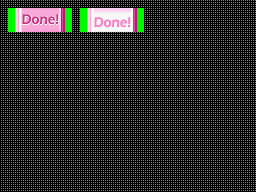
<style>
.page{position:relative;width:256px;height:192px;background:#000000}
.page>*{position:absolute;margin:0}
.t1{font:14.3px "ErasITC-Demi";color:#c83888;scale:0.91 1}
.t2{font:14.3px "ErasITC-Demi";color:#f880c8;scale:0.91 1}
</style>
<div class="page">
<p class="t1" style="left:22px;top:14px;width:37px;height:11px">Done!</p>
<p class="t2" style="left:94px;top:17px;width:37px;height:11px">Done!</p>
</div>
